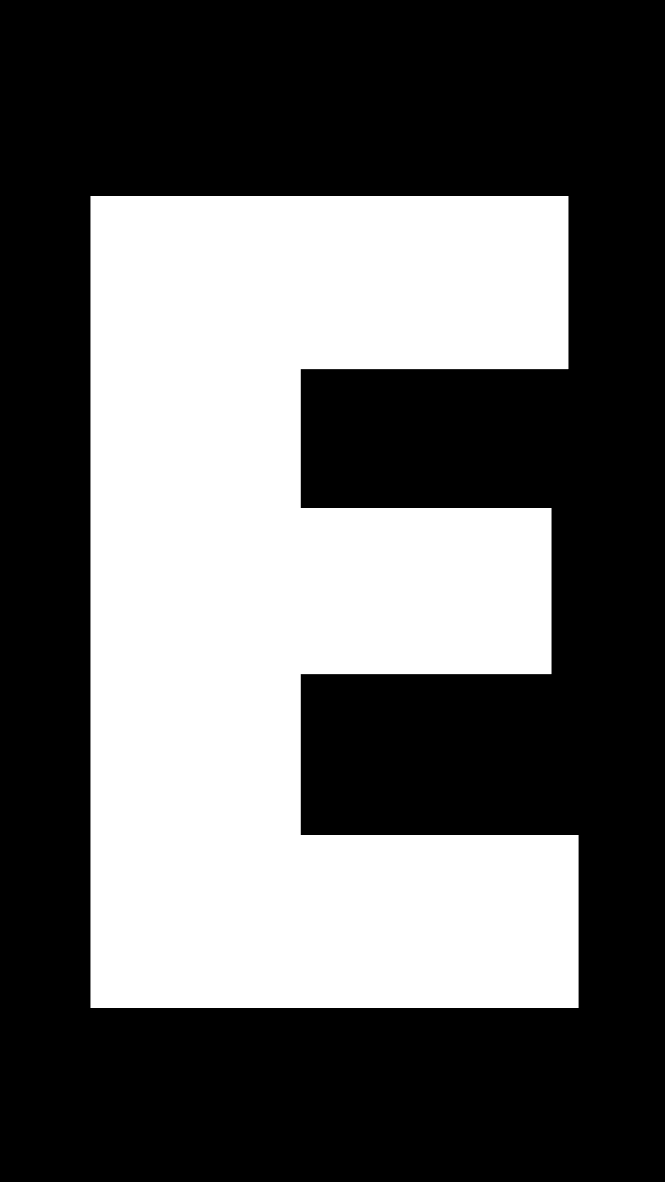
<style>
.page{position:relative;width:665px;height:1182px;background:#000000}
.page>*{position:absolute;margin:0}
.t1{font:1136.9px "HelveticaNeue-CondensedBlack";color:#ffffff}
</style>
<div class="page">
<p class="t1" style="left:90px;top:196px;width:489px;height:812px">E</p>
</div>
